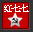
<style>
.page{position:relative;width:33px;height:32px;background:#c50000}
.page>*{position:absolute;margin:0}
.t1{font:10.4px "SimSun";letter-spacing:-0.25em;color:#ffffff}
</style>
<div class="page">
<p class="t1" style="left:4px;top:4px;width:25px;height:8px">红七七</p>
</div>
